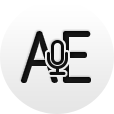
<style>
.page{position:relative;width:114px;height:114px;background:#ffffff}
.page>*{position:absolute;margin:0}
.t1{font:73.4px "SourceSansPro-ExtraLight";letter-spacing:0.02em;color:#000000;scale:0.9 1}
</style>
<div class="page">
<p class="t1" style="left:22px;top:33px;width:67px;height:48px">AE</p>
</div>
